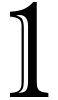
<style>
.page{position:relative;width:58px;height:100px;background:#ffffff}
.page>*{position:absolute;margin:0}
.t1{font:135px "ImprintMT-Shadow";color:#000000}
</style>
<div class="page">
<p class="t1" style="left:10px;top:2px;width:39px;height:95px">1</p>
</div>
